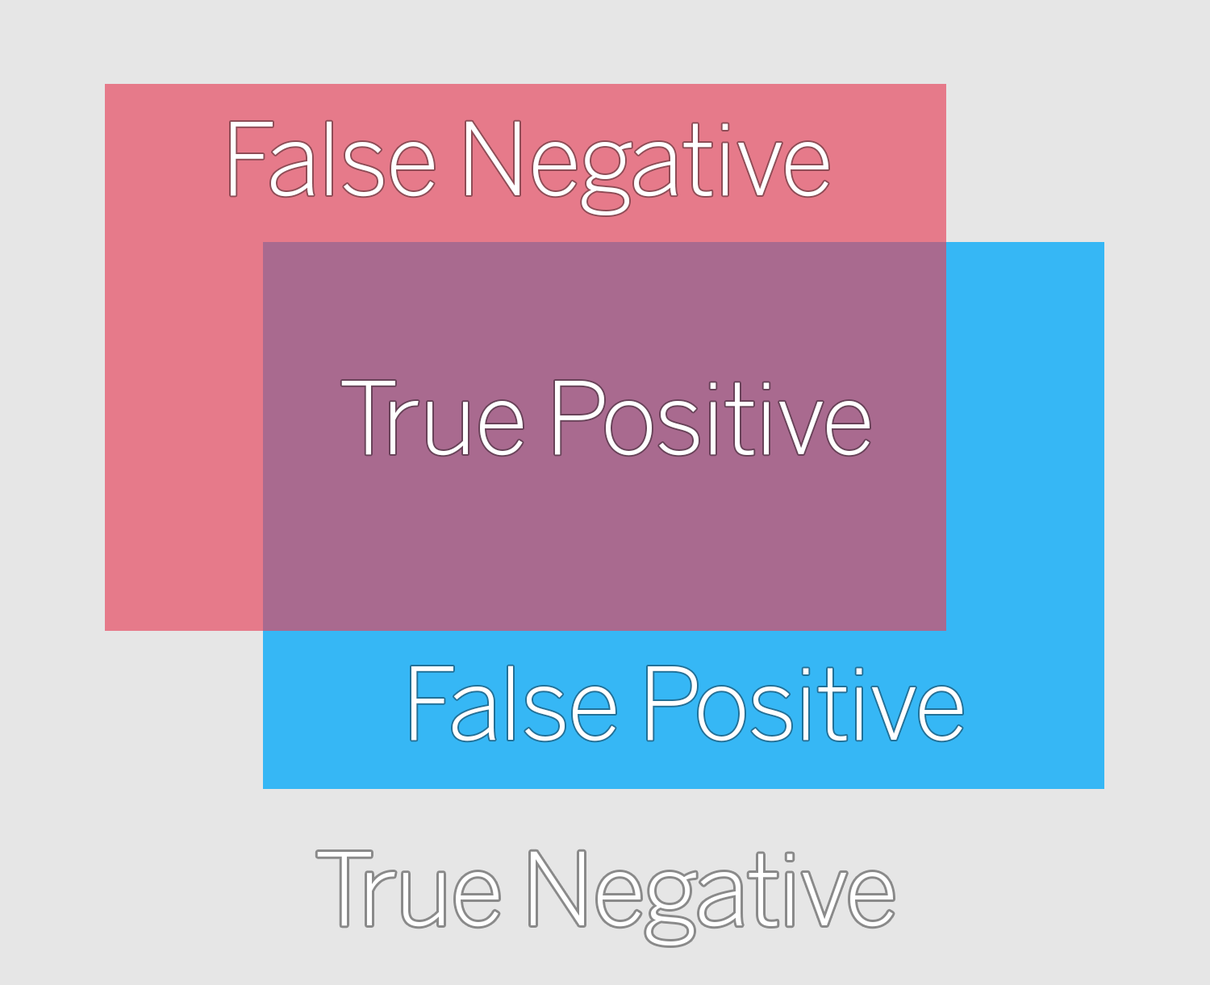
<style>
.page{position:relative;width:1210px;height:985px;background:#e6e6e6}
.page>*{position:absolute;margin:0}
.t1{font:99.5px "BentonSans-Light";letter-spacing:-0.02em;color:#ffffff}
</style>
<div class="page">
<p class="t1" style="left:231px;top:121px;width:598px;height:94px">False Negative</p>
<p class="t1" style="left:341px;top:381px;width:529px;height:75px">True Positive</p>
<p class="t1" style="left:412px;top:666px;width:551px;height:76px">False Positive</p>
<p class="t1" style="left:317px;top:851px;width:576px;height:95px">True Negative</p>
</div>
